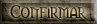
<style>
.page{position:relative;width:97px;height:24px}
.page>*{position:absolute;margin:0}
.t1{font:17.1px "Morpheus"}
</style>
<div class="page">
<p class="t1" style="left:10px;top:5px;width:80px;height:16px">Confirmar</p>
</div>
